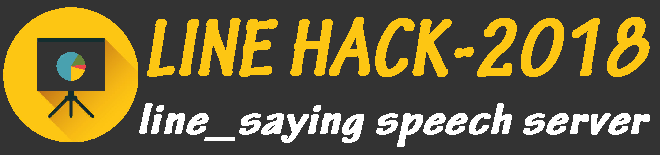
<style>
.page{position:relative;width:660px;height:155px;background:#333333}
.page>*{position:absolute;margin:0}
.t1{font:44.8px/49.3px "TektonPro-BoldCond";color:#ffffff;font-weight:bold;font-style:italic;scale:1.25 1}
.t2{font:88px/28.3px "TektonPro-BoldCond";color:#fdc613;font-weight:bold;font-style:italic;scale:0.91 1}
</style>
<div class="page">
<p class="t1" style="left:139px;top:17px;width:511px;height:130px;text-align:right"><span class="t2">LINE HACK-2018<br><br></span>line_saying speech server</p>
</div>
